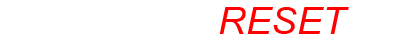
<style>
.page{position:relative;width:393px;height:43px;background:#ffffff}
.page>*{position:absolute;margin:0}
.t1{font:38.2px "Arial-ItalicMT";color:#ff0000}
</style>
<div class="page">
<p class="t1" style="left:219px;top:7px;width:130px;height:27px">RESET</p>
</div>
